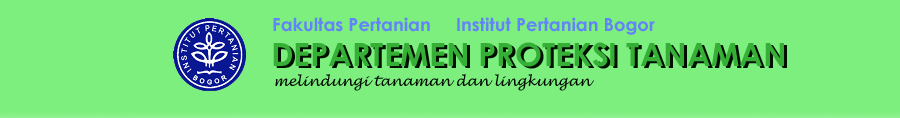
<style>
.page{position:relative;width:900px;height:118px;background:#7def7e}
.page>*{position:absolute;margin:0}
.t1{font:18px "CenturyGothic-Bold";color:#6383f9}
.t2{font:32px "CenturyGothic-Bold"}
.t3{font:14px "LucidaHandwriting-Italic";color:#010a01}
</style>
<div class="page">
<p class="t1" style="left:273px;top:17px;width:382px;height:18px">Fakultas Pertanian     Institut Pertanian Bogor</p>
<p class="t2" style="left:276px;top:44px;width:511px;height:25px">DEPARTEMEN PROTEKSI TANAMAN</p>
<p class="t3" style="left:275px;top:73px;width:319px;height:18px">melindungi tanaman dan lingkungan</p>
</div>
